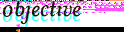
<style>
.page{position:relative;width:124px;height:32px;background:#ffffff}
.page>*{position:absolute;margin:0}
.t1{font:30px "MrsEavesItalic"}
</style>
<div class="page">
<p class="t1" style="left:2px;top:2px;width:79px;height:28px">objective</p>
</div>
